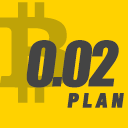
<style>
.page{position:relative;width:128px;height:128px;background:#ffd200}
.page>*{position:absolute;margin:0}
.t1{font:58px "Impact";letter-spacing:-0.05em;color:#444444}
.t2{font:19.8px "HelveticaNeue-CondensedBlack";letter-spacing:0.2em;color:#444444;text-transform:uppercase;font-weight:bold}
</style>
<div class="page">
<p class="t1" style="left:26px;top:40px;width:93px;height:48px">0.02</p>
<p class="t2" style="left:67px;top:93px;width:57px;height:15px">plan</p>
</div>
